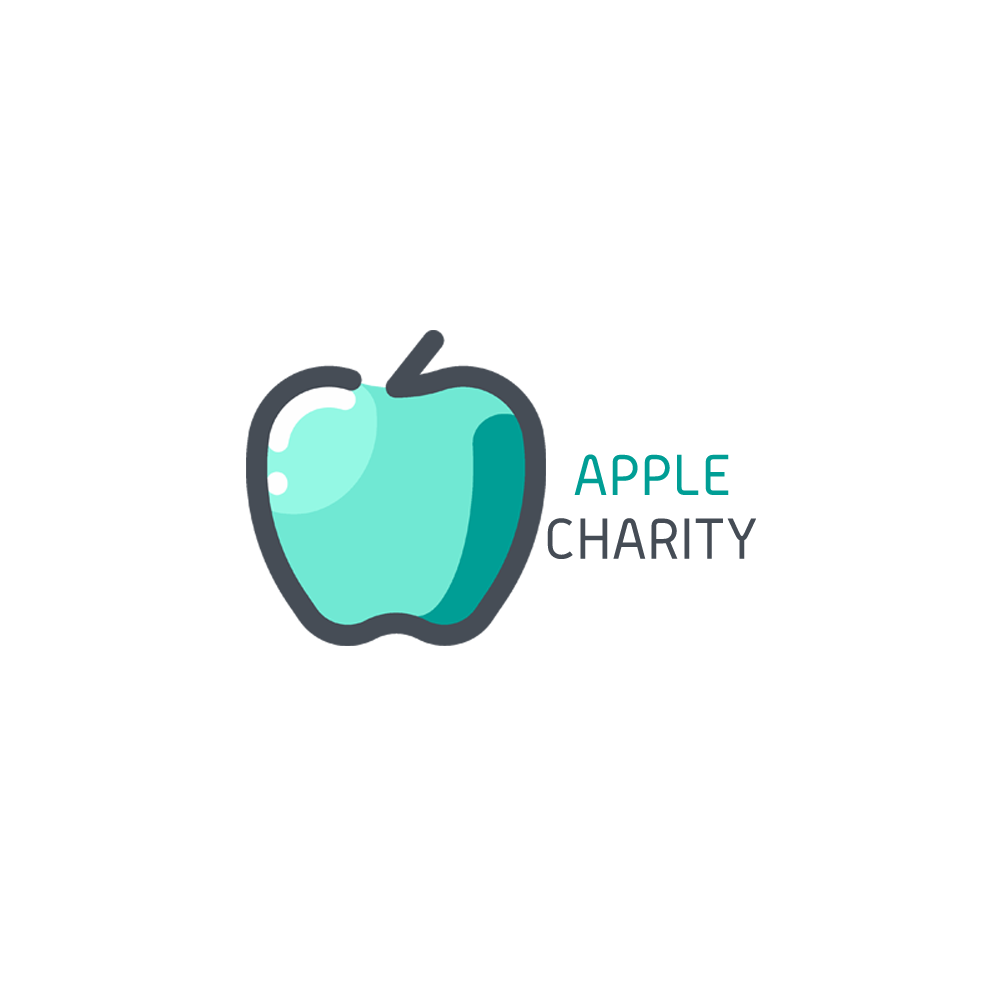
<style>
.page{position:relative;width:1000px;height:1000px;background:#ffffff}
.page>*{position:absolute;margin:0}
.t1{font:60px "Gidolinya-Regular";color:#009e95}
.t2{font:60px "Gidolinya-Regular";color:#454c55}
</style>
<div class="page">
<p class="t1" style="left:574px;top:454px;width:155px;height:41px">APPLE</p>
<p class="t2" style="left:547px;top:518px;width:209px;height:41px">CHARITY</p>
</div>
